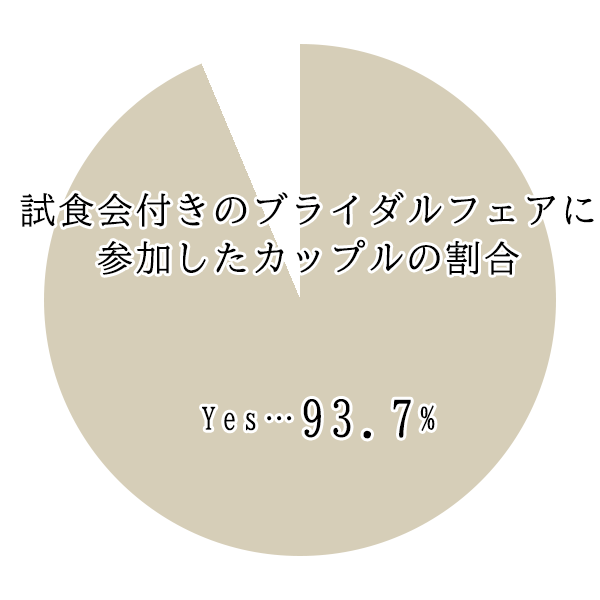
<style>
.page{position:relative;width:600px;height:600px;background:#ffffff}
.page>*{position:absolute;margin:0}
.t1{font:36px/48px "BIZ-UDMincho-Medium";letter-spacing:0.075em;color:#000000}
.t2{font:30px "BIZ-UDMincho-Medium";letter-spacing:0.2em;color:#000000}
.t3{font:48px "BIZ-UDMincho-Medium";letter-spacing:0.2em;color:#000000}
</style>
<div class="page">
<p class="t1" style="left:20px;top:191px;width:574px;height:84px;text-align:center">試食会付きのブライダルフェアに<br>参加したカップルの割合</p>
<p class="t2" style="left:202px;top:399px;width:233px;height:40px">Yes…<span class="t3">93.7</span>%</p>
</div>
